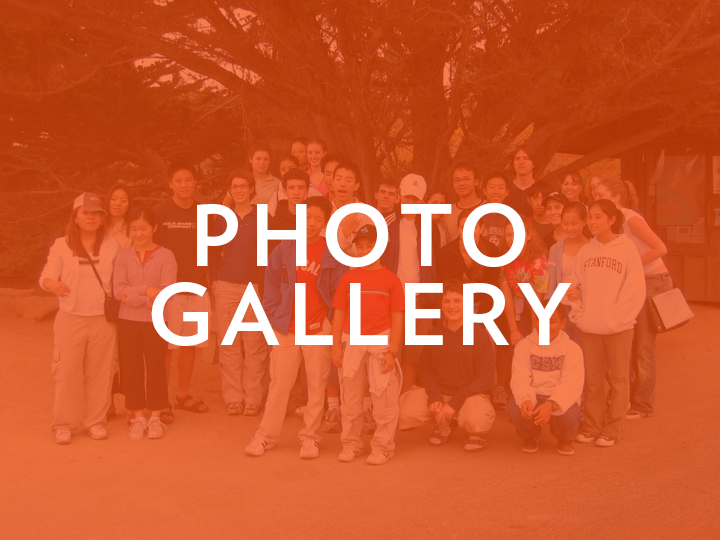
<style>
.page{position:relative;width:720px;height:540px}
.page>*{position:absolute;margin:0}
.t1{font:84.8px/79.1px "Verlag-Bold";letter-spacing:0.1em;color:#ffffff}
</style>
<div class="page">
<p class="t1" style="left:151px;top:203px;width:421px;height:143px;text-align:center">PHOTO<br>GALLERY</p>
</div>
